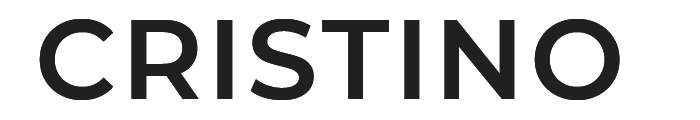
<style>
.page{position:relative;width:700px;height:120px;background:#ffffff}
.page>*{position:absolute;margin:0}
.t1{font:112px "Montserrat-SemiBold";letter-spacing:0.04em;color:#202020}
</style>
<div class="page">
<p class="t1" style="left:39px;top:19px;width:581px;height:81px">CRISTINO</p>
<p class="t1" style="left:39px;top:19px;width:581px;height:81px">CRISTINO</p>
</div>
